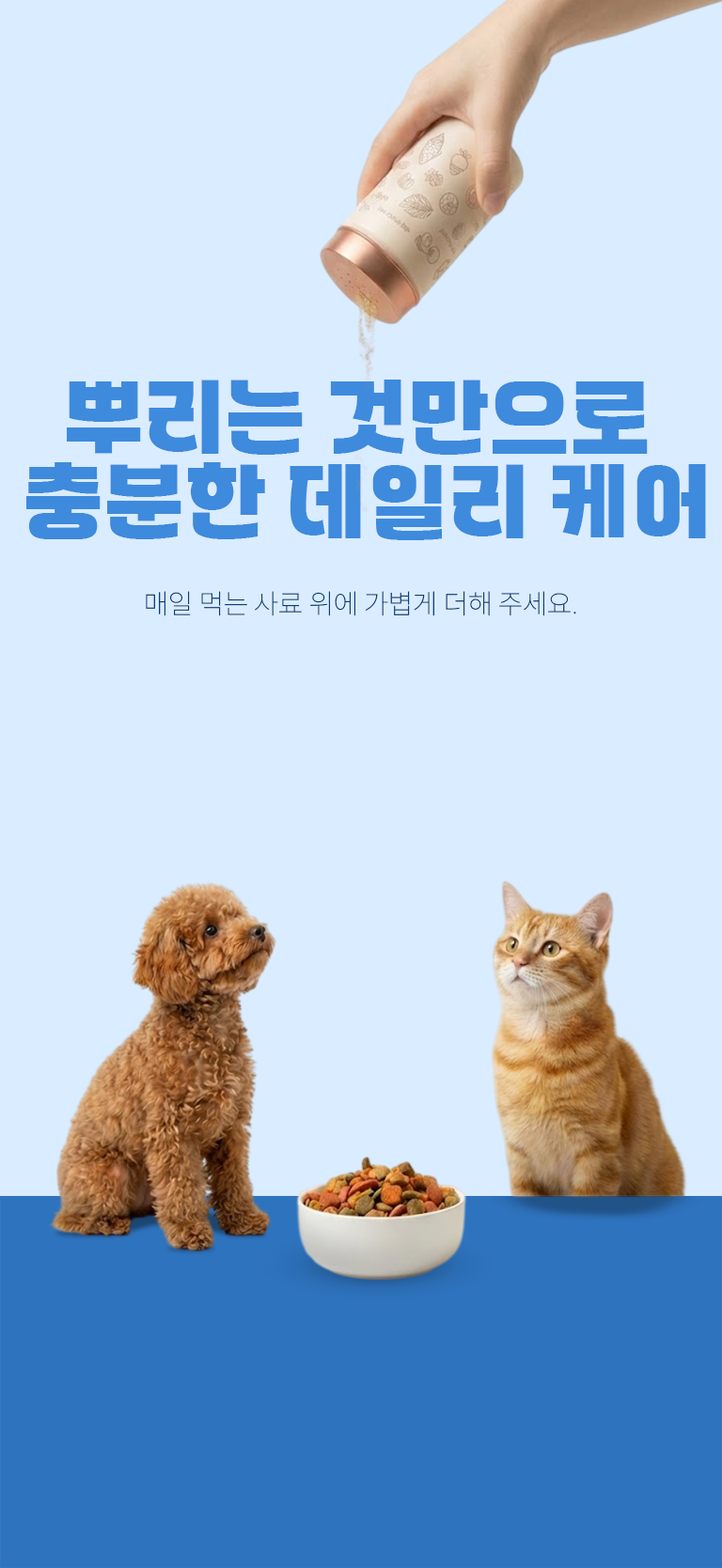
<style>
.page{position:relative;width:722px;height:1568px;background:#daecff}
.page>*{position:absolute;margin:0}
.t1{font:86.4px/84.6px "WAGURI-TTF";color:#3e8add;text-transform:uppercase}
.t2{font:28.2px "Pretendard-Thin";color:#093e77;text-transform:uppercase}
</style>
<div class="page">
<p class="t1" style="left:26px;top:380px;width:680px;height:160px;text-align:center">뿌리는 것만으로 <br>충분한 데일리 케어</p>
<p class="t2" style="left:146px;top:591px;width:430px;height:25px">매일 먹는 사료 위에 가볍게 더해 주세요.</p>
</div>
